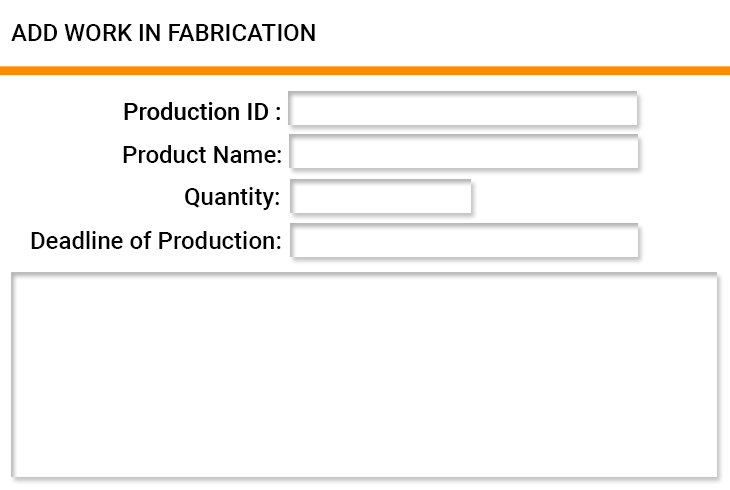
<style>
.page{position:relative;width:730px;height:490px;background:#ffffff}
.page>*{position:absolute;margin:0}
.t1{font:24px "Roboto-Medium";color:#000000}
</style>
<div class="page">
<p class="t1" style="left:11px;top:24px;width:304px;height:17px">ADD WORK IN FABRICATION</p>
<p class="t1" style="left:123px;top:145px;width:158px;height:18px">Product Name:</p>
<p class="t1" style="left:185px;top:187px;width:94px;height:23px">Quantity:</p>
<p class="t1" style="left:31px;top:231px;width:250px;height:18px">Deadline of Production:</p>
</div>
